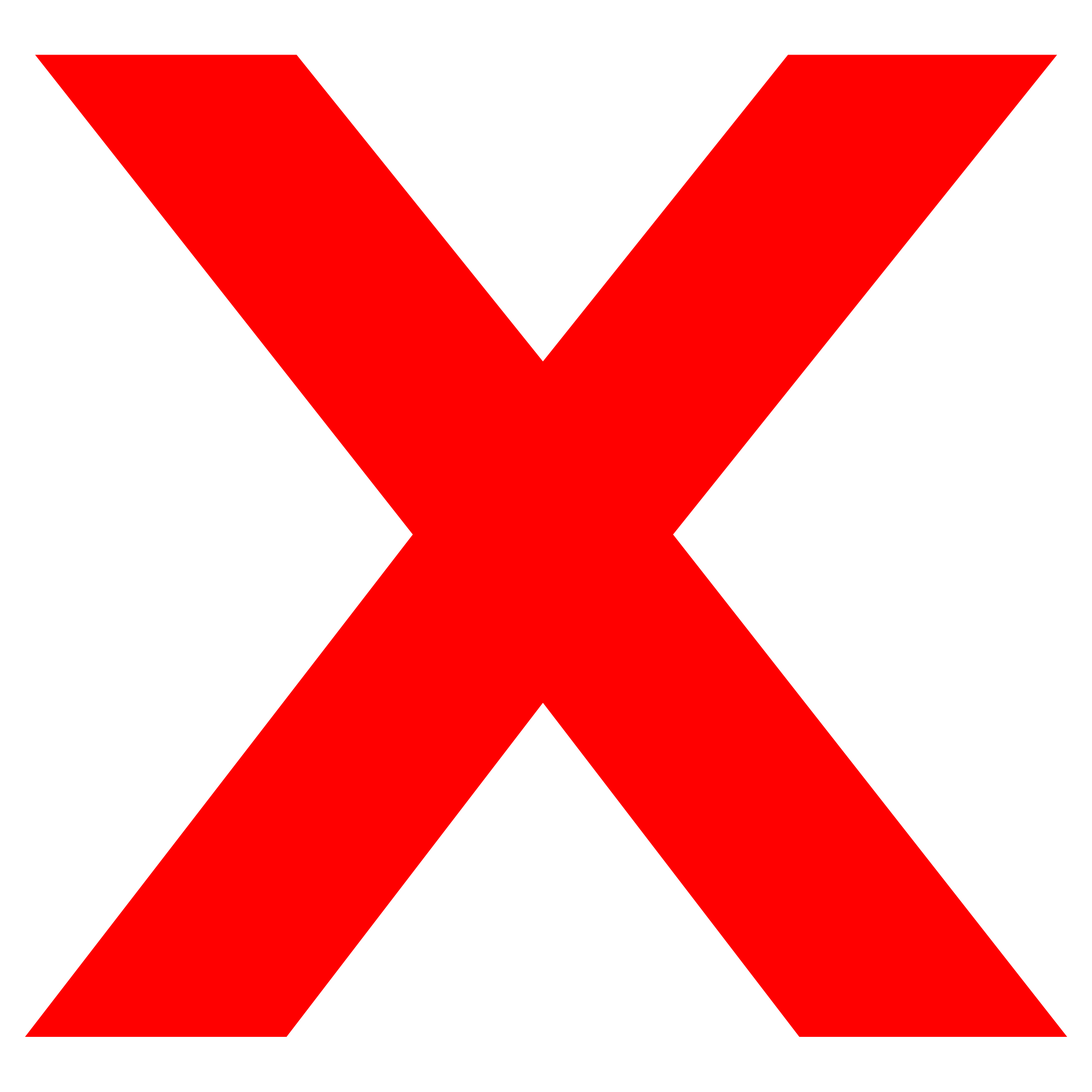
<style>
.page{position:relative;width:1092px;height:1092px;background:#ffffff}
.page>*{position:absolute;margin:0}
.t1{font:1193.2px "RabbidHighwaySignII";color:#ff0000;scale:1.06 1}
</style>
<div class="page">
<p class="t1" style="left:25px;top:55px;width:1042px;height:982px">X</p>
</div>
